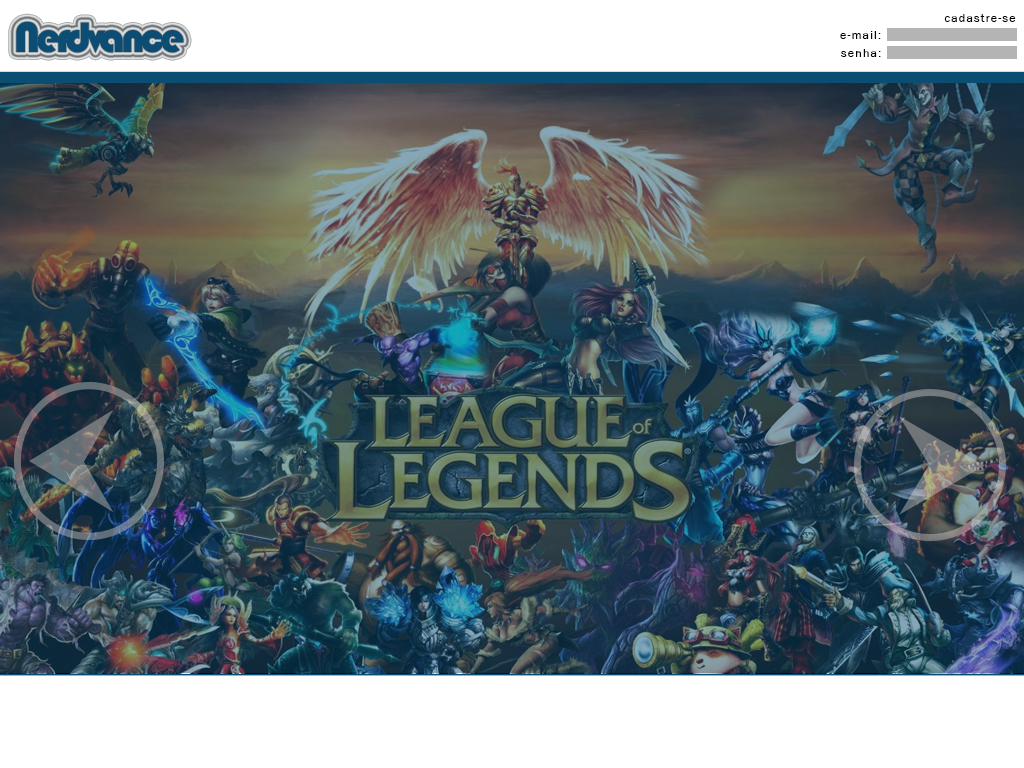
<style>
.page{position:relative;width:1024px;height:768px;background:#ffffff}
.page>*{position:absolute;margin:0}
.t1{font:12px "FranklinGothic-Book";letter-spacing:0.1em;color:#000000}
.t2{font:44.3px "Bauhaus93";letter-spacing:-0.1em;color:#0b4d73}
</style>
<div class="page">
<p class="t1" style="left:944px;top:14px;width:72px;height:8px">cadastre-se</p>
<p class="t2" style="left:16px;top:21px;width:168px;height:32px">Nerdvance</p>
<p class="t1" style="left:840px;top:31px;width:41px;height:8px">e-mail:</p>
<p class="t1" style="left:841px;top:49px;width:40px;height:8px">senha:</p>
</div>
